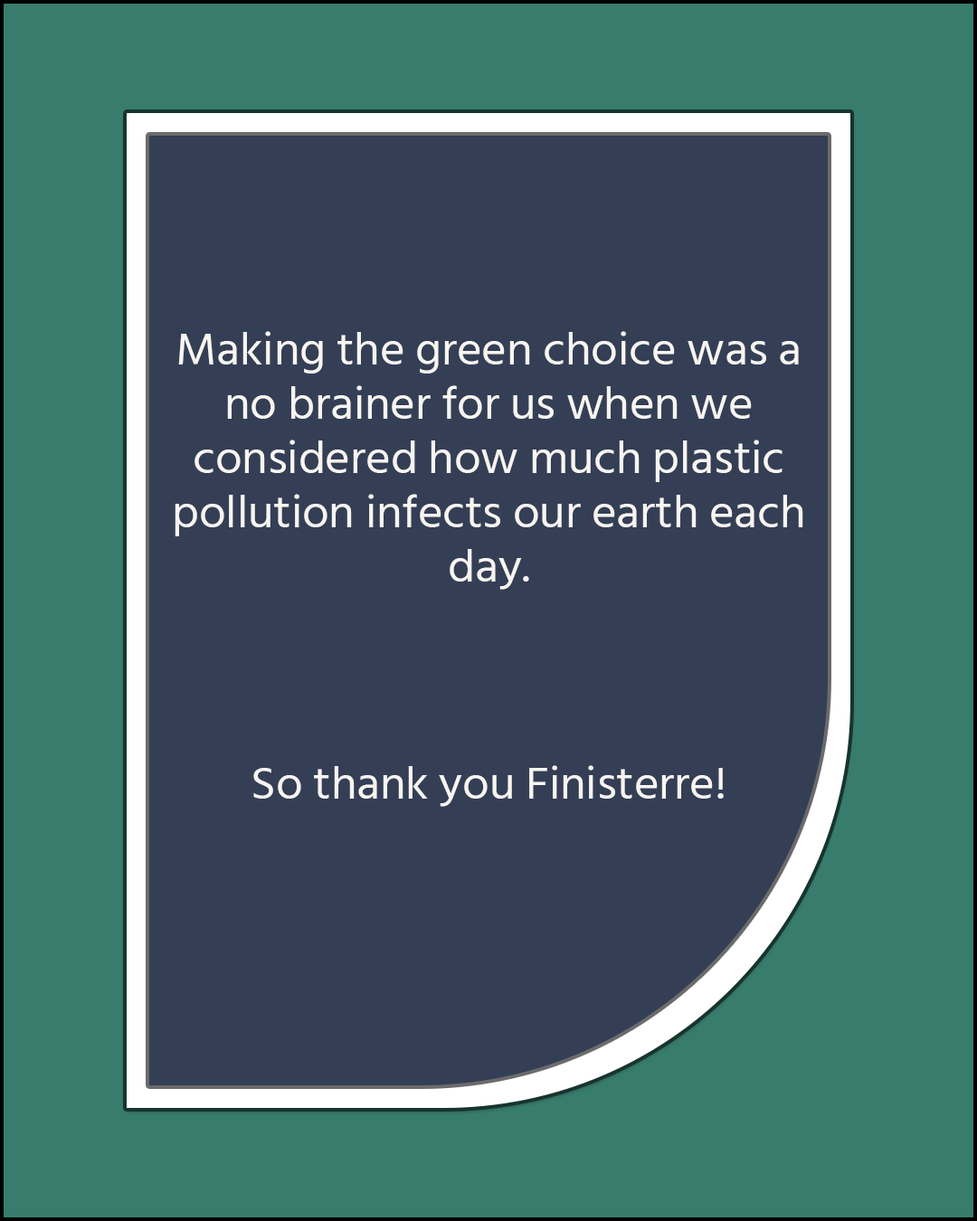
<style>
.page{position:relative;width:977px;height:1221px;background:#343f56}
.page>*{position:absolute;margin:0}
.t1{font:45.2px "HindSiliguri-Regular";color:#f8f5f1;scale:1.05 1}
</style>
<div class="page">
<p class="t1" style="left:175px;top:331px;width:628px;height:476px;text-align:center">Making the green choice was a no brainer for us when we considered how much plastic pollution infects our earth each day. <br><br><br><br>So thank you Finisterre!</p>
</div>
